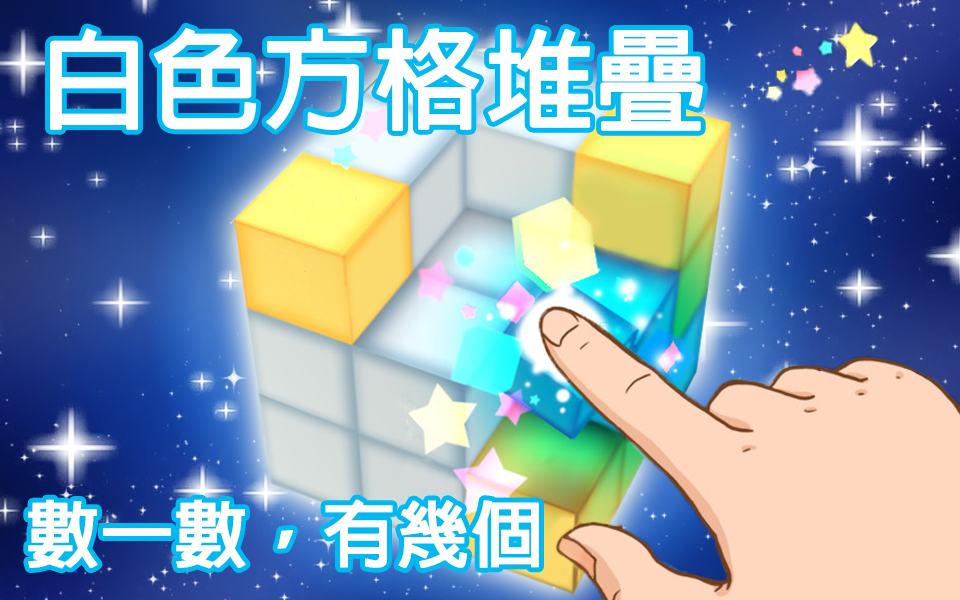
<style>
.page{position:relative;width:960px;height:600px}
.page>*{position:absolute;margin:0}
.t1{font:108.5px "AdobeFanHeitiStd-Bold";color:#ffffff;font-weight:bold}
.t2{font:72px "AdobeFanHeitiStd-Bold";color:#ffffff;font-weight:bold}
</style>
<div class="page">
<p class="t1" style="left:50px;top:27px;width:653px;height:104px">白色方格堆疊</p>
<p class="t2" style="left:28px;top:499px;width:511px;height:70px">數一數，有幾個</p>
</div>
